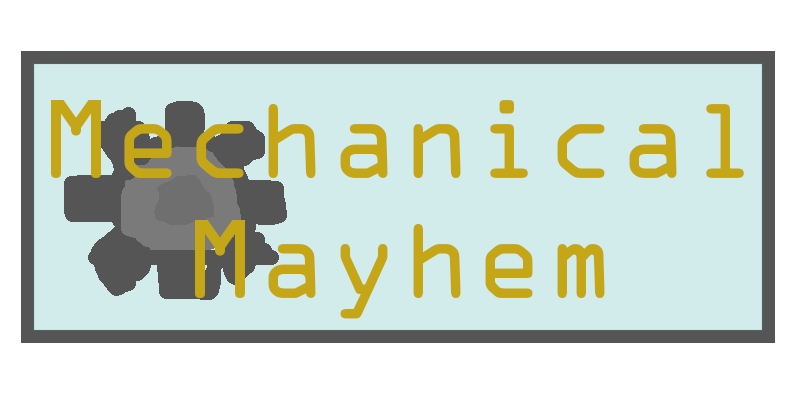
<style>
.page{position:relative;width:800px;height:400px;background:#d2ecec}
.page>*{position:absolute;margin:0}
.t1{font:100.1px "OCRAStd";color:#c5a617}
</style>
<div class="page">
<p class="t1" style="left:51px;top:100px;width:693px;height:219px;text-align:center">Mechanical<br>Mayhem</p>
</div>
